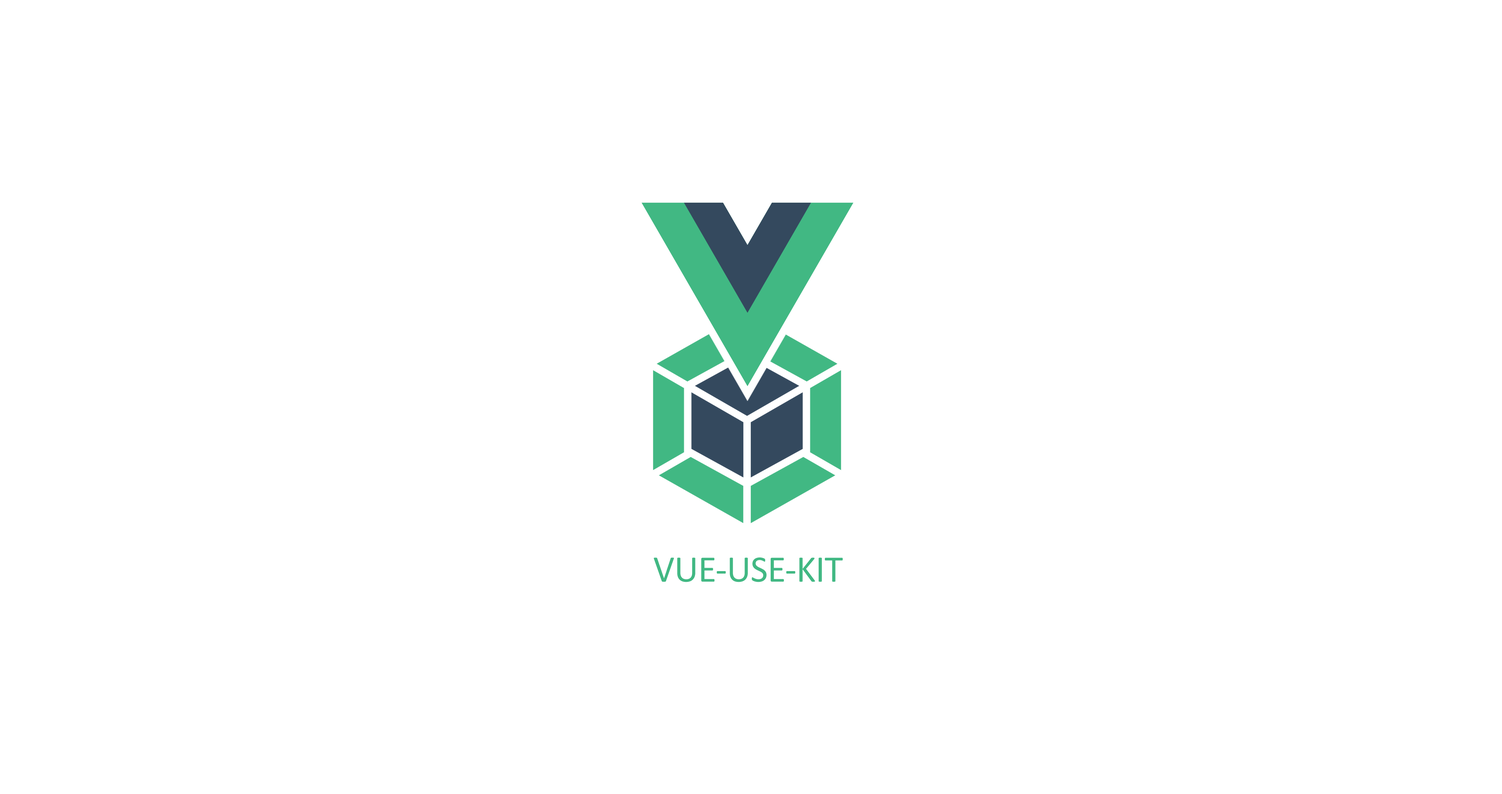
<style>
.page{position:relative;width:1502px;height:794px;background:#ffffff}
.page>*{position:absolute;margin:0}
.t1{font:37.7px "Calibri";letter-spacing:-0.01em;color:#41b883}
</style>
<div class="page">
<p class="t1" style="left:653px;top:557px;width:190px;height:25px">VUE-USE-KIT</p>
</div>
